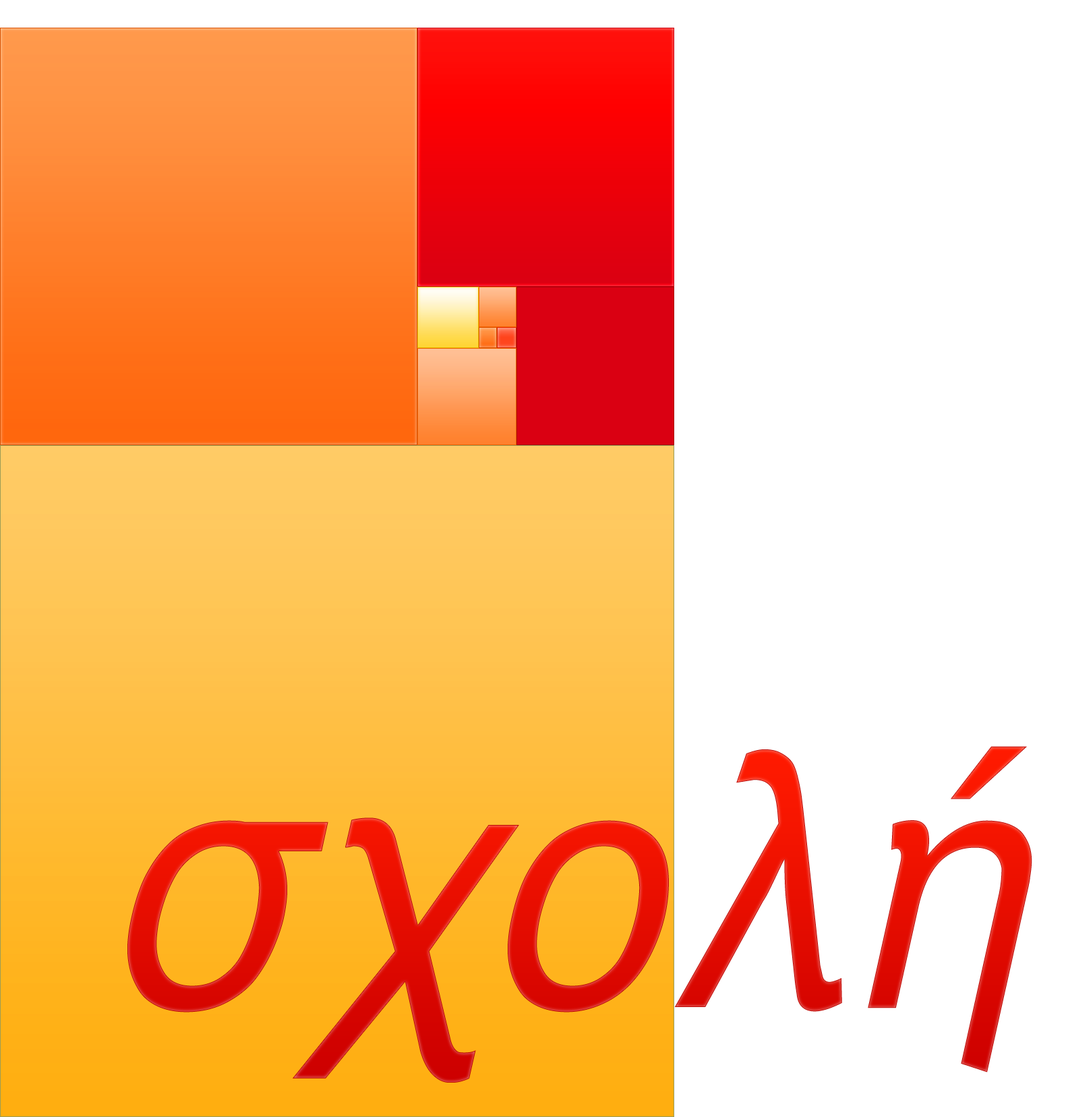
<style>
.page{position:relative;width:1068px;height:1117px;background:#ffffff}
.page>*{position:absolute;margin:0}
.t1{font:352.8px "FreeSansOblique";color:#e61100;scale:0.89 1}
</style>
<div class="page">
<p class="t1" style="left:127px;top:746px;width:905px;height:336px">σχολή</p>
</div>
